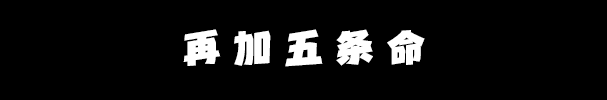
<style>
.page{position:relative;width:607px;height:100px;background:#000000}
.page>*{position:absolute;margin:0}
.t1{font:37.5px "HGGHT";letter-spacing:0.36em;color:#ffffff}
</style>
<div class="page">
<p class="t1" style="left:183px;top:29px;width:242px;height:38px">再加五条命</p>
</div>
